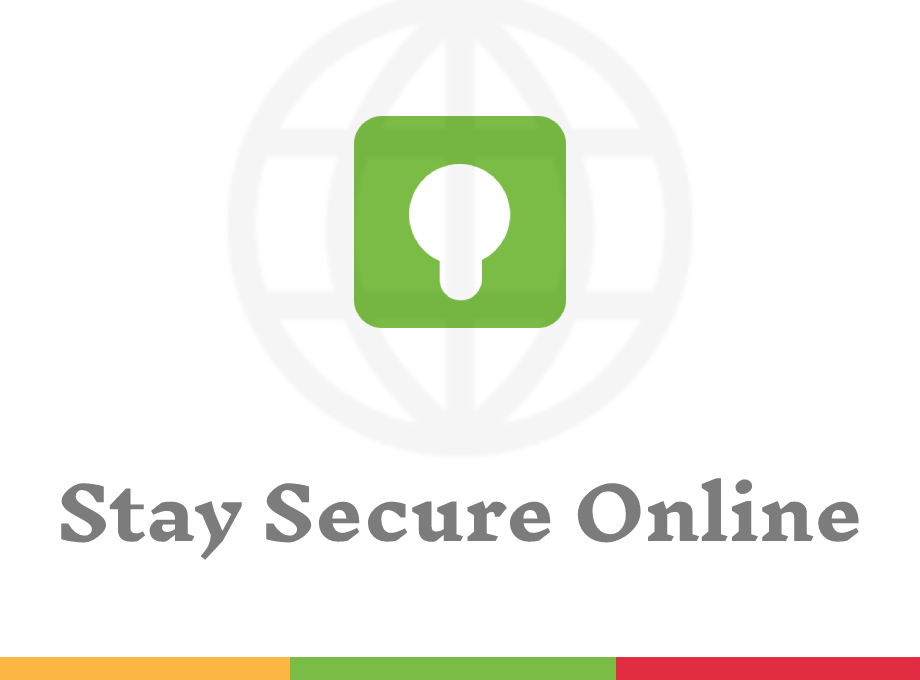
<style>
.page{position:relative;width:920px;height:680px;background:#ffffff}
.page>*{position:absolute;margin:0}
.t1{font:71.8px "InknutAntiqua-Bold";color:#7c7c7c;scale:1.03 1}
</style>
<div class="page">
<p class="t1" style="left:61px;top:478px;width:798px;height:82px">Stay Secure Online</p>
</div>
